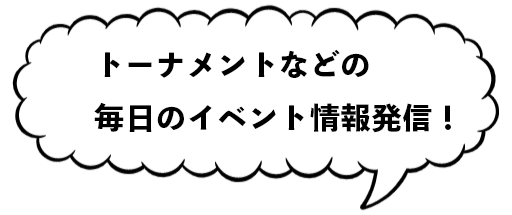
<style>
.page{position:relative;width:512px;height:215px;background:#ffffff}
.page>*{position:absolute;margin:0}
.t1{font:30px "ToppanBunkyuMidashiGothicStdN-ExtraBold";letter-spacing:0.025em;color:#000000}
</style>
<div class="page">
<p class="t1" style="left:94px;top:49px;width:357px;height:84px">トーナメントなどの<br>毎日のイベント情報発信！</p>
</div>
